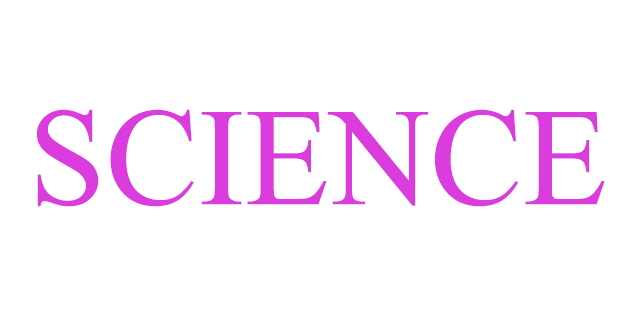
<style>
.page{position:relative;width:636px;height:320px;background:#ffffff}
.page>*{position:absolute;margin:0}
.t1{font:139px "TimesNewRomanPSMT";color:#db3cdd}
</style>
<div class="page">
<p class="t1" style="left:37px;top:109px;width:568px;height:98px">SCIENCE</p>
</div>
